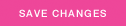
<style>
.page{position:relative;width:126px;height:26px;background:#ee4799}
.page>*{position:absolute;margin:0}
.t1{font:10px "HelveticaNeue-Medium";letter-spacing:0.1em;color:#ffffff}
</style>
<div class="page">
<p class="t1" style="left:19px;top:9px;width:87px;height:8px">SAVE CHANGES</p>
</div>
